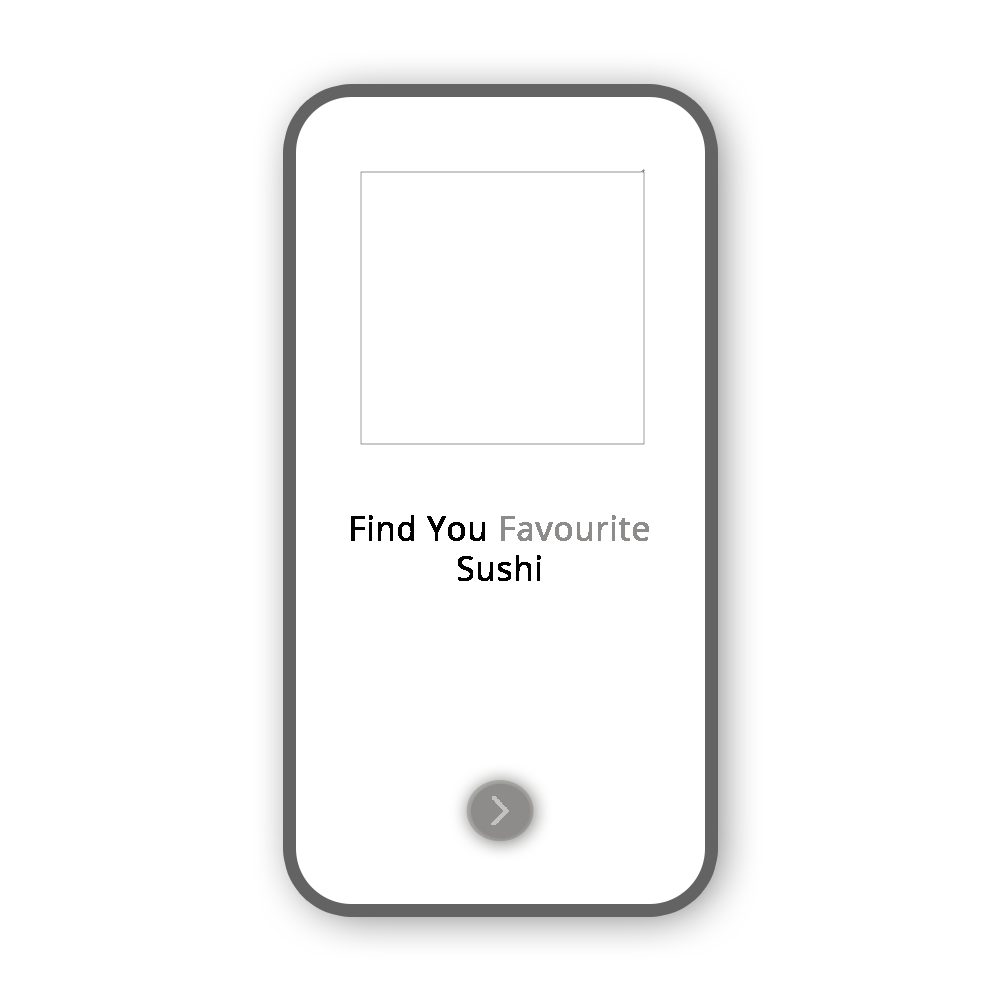
<style>
.page{position:relative;width:1000px;height:1000px;background:#ffffff}
.page>*{position:absolute;margin:0}
.t1{font:33.3px "OpenSans";color:#8d8c8a;font-weight:bold}
.t2{font:33.3px "OpenSans";color:#000000;font-weight:bold}
</style>
<div class="page">
<p class="t1" style="left:351px;top:515px;width:298px;height:66px;text-align:center"><span class="t2">Find You </span>Favourite <br><span class="t2">Sushi</span></p>
</div>
